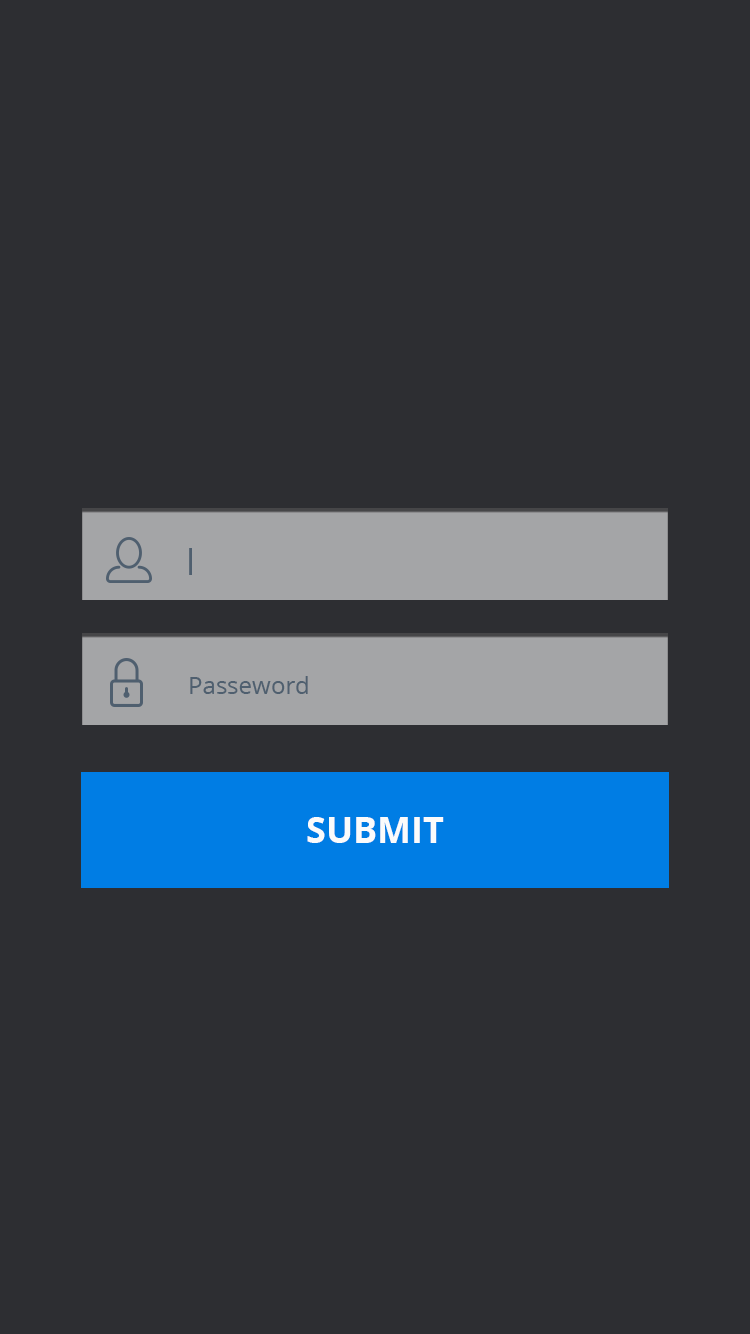
<style>
.page{position:relative;width:750px;height:1334px;background:#2d2e32}
.page>*{position:absolute;margin:0}
.t1{font:36px "OpenSans";color:#4f5f6f}
.t2{font:24px "OpenSans";color:#4f5f6f}
.t3{font:36px "OpenSans-Bold";color:#fbfbfb}
</style>
<div class="page">
<p class="t1" style="left:189px;top:548px;width:3px;height:27px">l</p>
<p class="t2" style="left:190px;top:676px;width:118px;height:18px">Passeword</p>
<p class="t3" style="left:307px;top:817px;width:137px;height:26px">SUBMIT</p>
</div>
